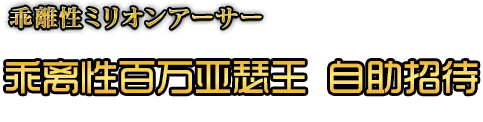
<style>
.page{position:relative;width:483px;height:122px;background:#ffffff}
.page>*{position:absolute;margin:0}
.t1{font:38.6px "TRENDS"}
</style>
<div class="page">
<p class="t1" style="left:6px;top:61px;width:472px;height:33px">乖离性百万亚瑟王 自助招待</p>
</div>
